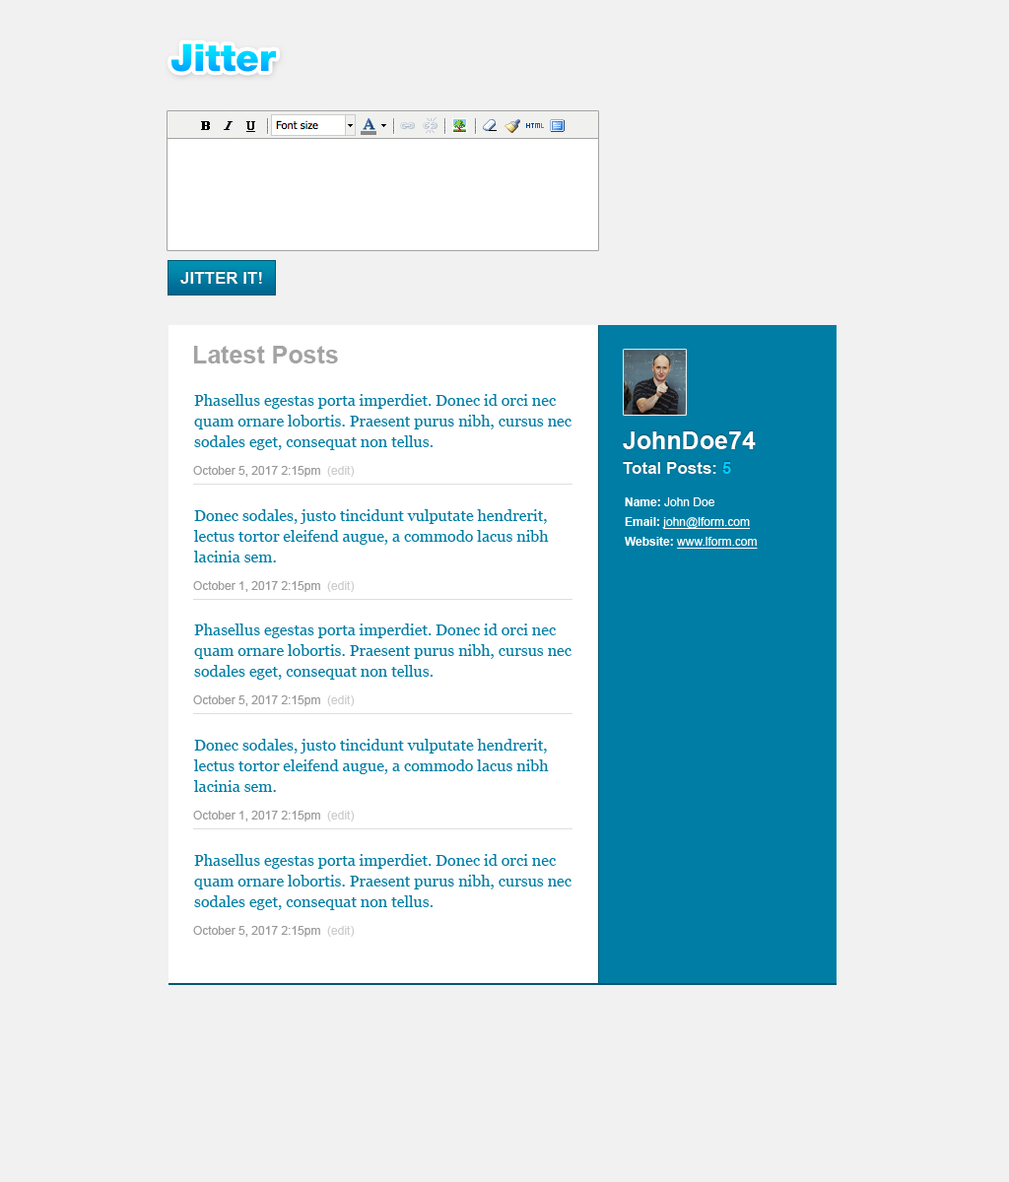
<style>
.page{position:relative;width:1009px;height:1182px;background:#f1f1f1}
.page>*{position:absolute;margin:0}
.t1{font:37.4px "HelveticaNeueLTStd-Blk";color:#00ccff}
.t2{font:16.7px "Arial-BoldMT";color:#ffffff}
.t3{font:24.6px "Arial-BoldMT";color:#a3a3a3}
.t4{font:15.8px/20.7px "Georgia";color:#007da4}
.t5{font:16.7px/24.6px "Arial-BoldMT";color:#ffffff}
.t6{font:24.6px/24.6px "Arial-BoldMT";color:#ffffff}
.t7{font:16.7px/24.6px "Arial-BoldMT";color:#00ccff}
.t8{font:11.8px "ArialMT";color:#999999}
.t9{font:11.8px "ArialMT";color:#cccccc}
.t10{font:11.8px/19.7px "ArialMT";color:#ffffff;text-decoration:underline}
.t11{font:11.8px/19.7px "Arial-BoldMT";color:#ffffff}
.t12{font:11.8px/19.7px "ArialMT";color:#ffffff}
</style>
<div class="page">
<p class="t1" style="left:171px;top:43px;width:105px;height:29px">Jitter</p>
<p class="t2" style="left:180px;top:272px;width:82px;height:12px">JITTER IT!</p>
<p class="t3" style="left:194px;top:346px;width:144px;height:17px">Latest Posts</p>
<p class="t4" style="left:194px;top:394px;width:377px;height:56px">Phasellus egestas porta imperdiet. Donec id orci nec quam ornare lobortis. Praesent purus nibh, cursus nec sodales eget, consequat non tellus.</p>
<p class="t5" style="left:623px;top:431px;width:133px;height:43px"><span class="t6">JohnDoe74<br></span>Total Posts: <span class="t7">5</span></p>
<p class="t8" style="left:193px;top:466px;width:162px;height:11px">October 5, 2017 2:15pm <span class="t9"> (edit)</span></p>
<p class="t10" style="left:625px;top:497px;width:133px;height:52px"><span class="t11">Name: </span><span class="t12">John Doe<br></span><span class="t11">Email: </span>john@lform.com<br><span class="t11">Website: </span>www.lform.com</p>
<p class="t4" style="left:193px;top:509px;width:356px;height:53px">Donec sodales, justo tincidunt vulputate hendrerit, lectus tortor eleifend augue, a commodo lacus nibh lacinia sem.</p>
<p class="t8" style="left:193px;top:581px;width:162px;height:11px">October 1, 2017 2:15pm <span class="t9"> (edit)</span></p>
<p class="t4" style="left:194px;top:624px;width:377px;height:56px">Phasellus egestas porta imperdiet. Donec id orci nec quam ornare lobortis. Praesent purus nibh, cursus nec sodales eget, consequat non tellus.</p>
<p class="t8" style="left:193px;top:695px;width:162px;height:11px">October 5, 2017 2:15pm <span class="t9"> (edit)</span></p>
<p class="t4" style="left:193px;top:739px;width:356px;height:53px">Donec sodales, justo tincidunt vulputate hendrerit, lectus tortor eleifend augue, a commodo lacus nibh lacinia sem.</p>
<p class="t8" style="left:193px;top:811px;width:162px;height:11px">October 1, 2017 2:15pm <span class="t9"> (edit)</span></p>
<p class="t4" style="left:194px;top:854px;width:377px;height:56px">Phasellus egestas porta imperdiet. Donec id orci nec quam ornare lobortis. Praesent purus nibh, cursus nec sodales eget, consequat non tellus.</p>
<p class="t8" style="left:193px;top:926px;width:162px;height:11px">October 5, 2017 2:15pm <span class="t9"> (edit)</span></p>
</div>
